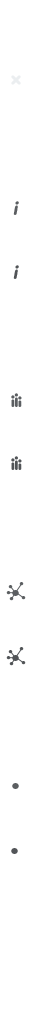
<style>
.page{position:relative;width:32px;height:1024px;background:#ffffff}
.page>*{position:absolute;margin:0}
.t1{font:18px "VAGRounded-Black";color:#5b5e61;font-style:italic}
.t2{font:18px "VAGRounded-Black";color:#515457;font-style:italic}
.t3{font:18px "VAGRounded-Black";color:#5b5e61}
.t4{font:18px "VAGRounded-Black";color:#515457}
</style>
<div class="page">
<p class="t1" style="left:13px;top:201px;width:6px;height:14px">i</p>
<p class="t2" style="left:13px;top:265px;width:6px;height:14px">i</p>
<p class="t3" style="left:14px;top:393px;width:4px;height:14px">i</p>
<p class="t4" style="left:14px;top:456px;width:4px;height:14px">i</p>
</div>
